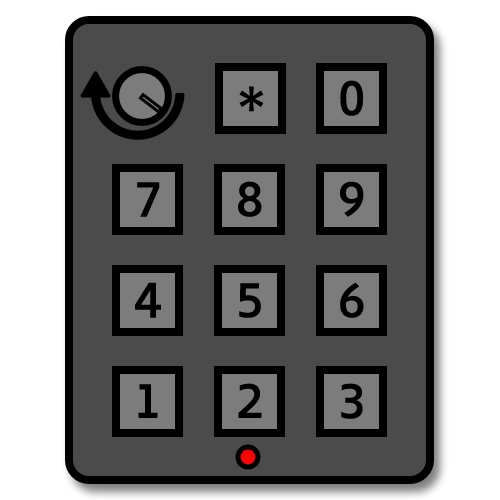
<style>
.page{position:relative;width:500px;height:500px;background:#4b4b4b}
.page>*{position:absolute;margin:0}
.t1{font:50px "Biryani-DemiBold";color:#000000}
</style>
<div class="page">
<p class="t1" style="left:239px;top:86px;width:25px;height:26px">*</p>
<p class="t1" style="left:340px;top:80px;width:24px;height:36px">0</p>
<p class="t1" style="left:137px;top:182px;width:23px;height:35px">7</p>
<p class="t1" style="left:238px;top:181px;width:24px;height:36px">8</p>
<p class="t1" style="left:339px;top:181px;width:25px;height:36px">9</p>
<p class="t1" style="left:135px;top:282px;width:26px;height:36px">4</p>
<p class="t1" style="left:239px;top:283px;width:22px;height:35px">5</p>
<p class="t1" style="left:340px;top:282px;width:24px;height:36px">6</p>
<p class="t1" style="left:138px;top:384px;width:20px;height:34px">1</p>
<p class="t1" style="left:238px;top:383px;width:24px;height:35px">2</p>
<p class="t1" style="left:341px;top:383px;width:22px;height:36px">3</p>
</div>
